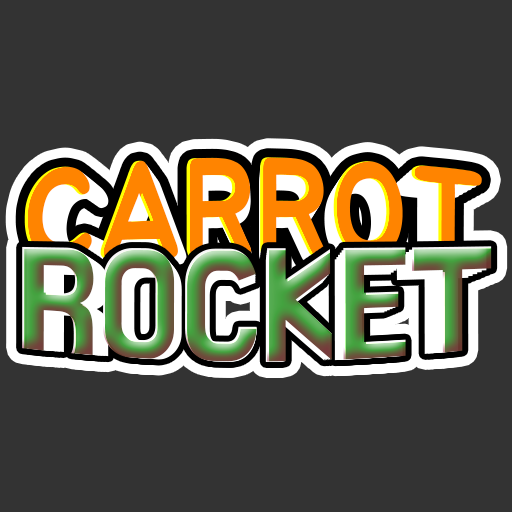
<style>
.page{position:relative;width:512px;height:512px;background:#333333}
.page>*{position:absolute;margin:0}
.t1{font:125px "BMJUA";letter-spacing:-0.01em;color:#ff8400}
.t2{font:122.5px "BMJUA";letter-spacing:-0.01em}
.t3{font:120.1px "BMJUA";letter-spacing:-0.01em}
.t4{font:117.6px "BMJUA";letter-spacing:-0.01em}
.t5{font:115.3px "BMJUA";letter-spacing:-0.01em}
.t6{font:113px "BMJUA";letter-spacing:-0.01em}
.t7{font:110.7px "BMJUA";letter-spacing:-0.01em}
.t8{font:124.3px "BMHANNA11yrsold";letter-spacing:-0.005em;scale:0.91 1}
</style>
<div class="page">
<p class="t1" style="left:24px;top:157px;width:458px;height:104px">CARROT</p>
<p class="t2" style="left:29px;top:160px;width:449px;height:102px">CARROT</p>
<p class="t3" style="left:33px;top:163px;width:440px;height:100px">CARROT</p>
<p class="t4" style="left:38px;top:166px;width:431px;height:98px">CARROT</p>
<p class="t5" style="left:42px;top:169px;width:422px;height:96px">CARROT</p>
<p class="t6" style="left:46px;top:172px;width:414px;height:94px">CARROT</p>
<p class="t7" style="left:50px;top:174px;width:406px;height:93px">CARROT</p>
<p class="t8" style="left:44px;top:257px;width:425px;height:105px">ROCKET</p>
</div>
